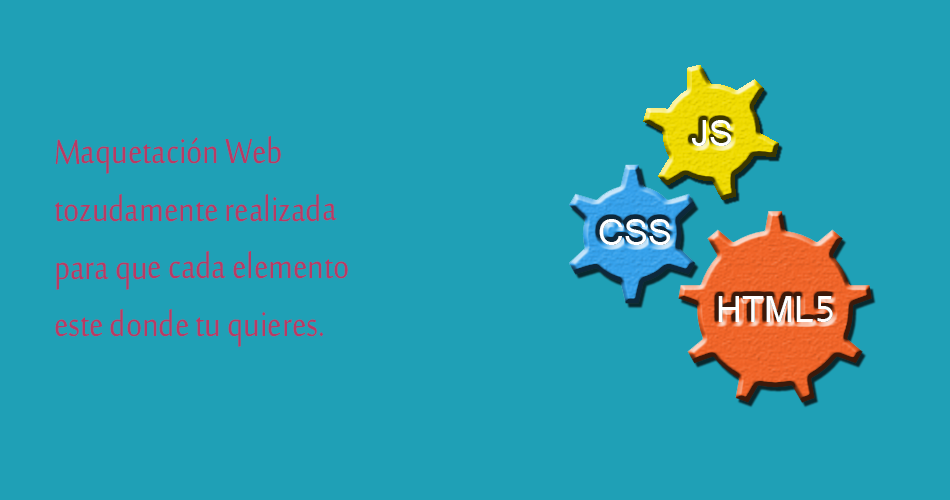
<style>
.page{position:relative;width:950px;height:500px;background:#1fa0b6}
.page>*{position:absolute;margin:0}
.t1{font:40px "Vrinda";color:#ffffff;text-transform:uppercase}
.t2{font:48px "SakkalMajalla";color:#b93a64;scale:0.84 1}
</style>
<div class="page">
<p class="t1" style="left:692px;top:120px;width:40px;height:26px">js</p>
<p class="t2" style="left:55px;top:136px;width:293px;height:211px">Maquetación Web <br>tozudamente realizada <br>para que cada elemento <br>este donde tu quieres.</p>
<p class="t1" style="left:599px;top:219px;width:72px;height:26px">css</p>
<p class="t1" style="left:718px;top:296px;width:115px;height:26px">html5</p>
</div>
